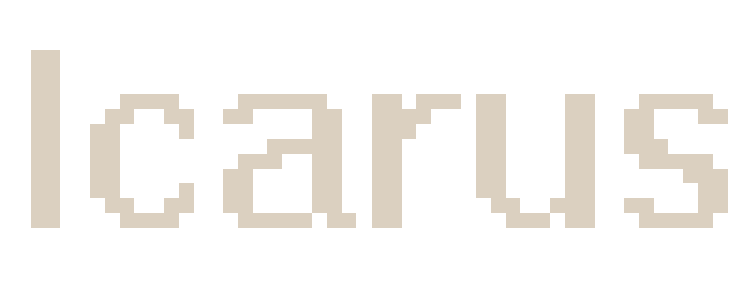
<style>
.page{position:relative;width:743px;height:299px;background:#ffffff}
.page>*{position:absolute;margin:0}
.t1{font:237.5px "System";color:#dbd0c0}
</style>
<div class="page">
<p class="t1" style="left:31px;top:50px;width:697px;height:178px">Icarus</p>
</div>
